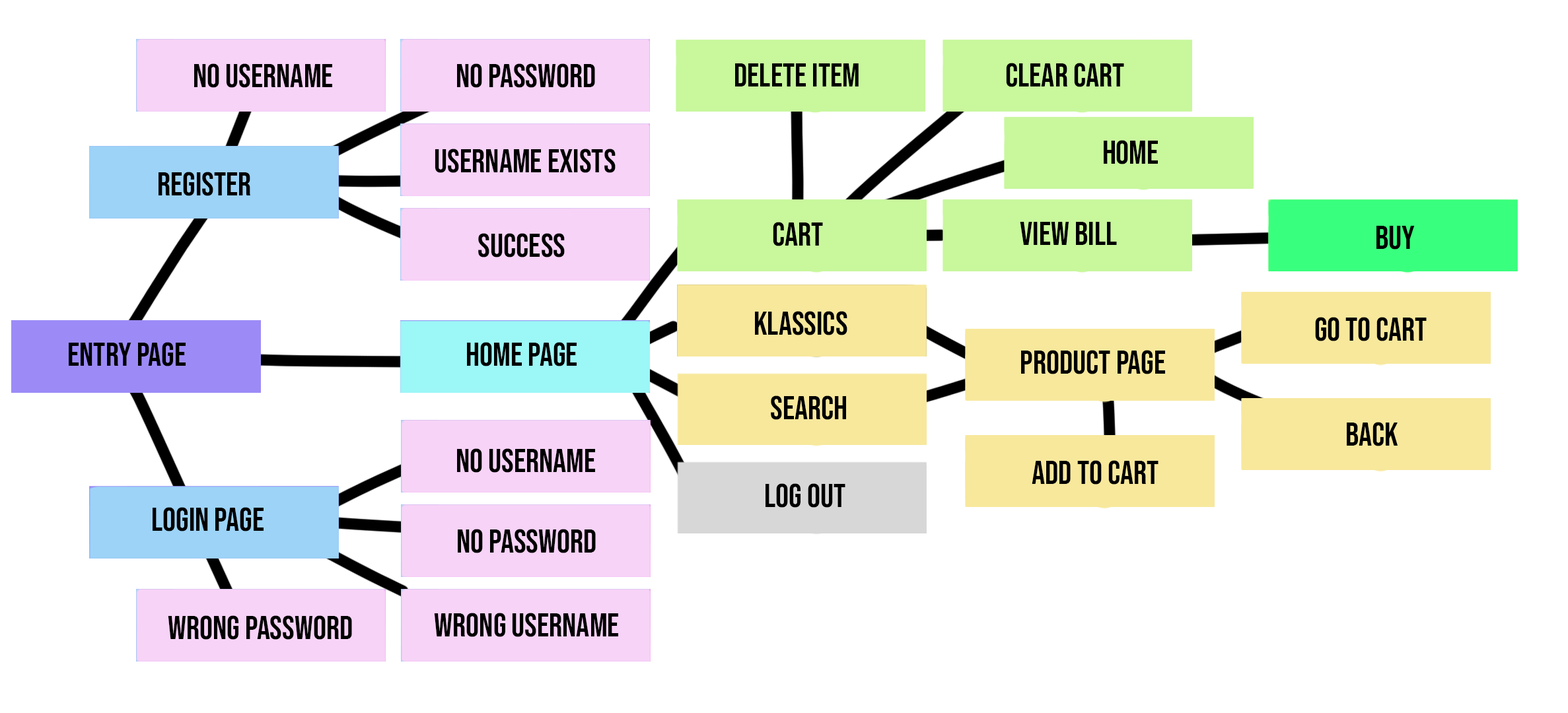
<style>
.page{position:relative;width:1568px;height:713px;background:#ffffff}
.page>*{position:absolute;margin:0}
.t1{font:33px "BebasNeue-Regular";color:#000000}
</style>
<div class="page">
<p class="t1" style="left:194px;top:63px;width:138px;height:25px">no username</p>
<p class="t1" style="left:457px;top:63px;width:138px;height:25px">No password</p>
<p class="t1" style="left:735px;top:63px;width:124px;height:24px">delete item</p>
<p class="t1" style="left:1006px;top:63px;width:118px;height:24px">clear cart</p>
<p class="t1" style="left:435px;top:149px;width:181px;height:24px">username exists</p>
<p class="t1" style="left:1104px;top:140px;width:54px;height:24px">Home</p>
<p class="t1" style="left:159px;top:172px;width:91px;height:24px">Register</p>
<p class="t1" style="left:773px;top:222px;width:50px;height:24px">Cart</p>
<p class="t1" style="left:1020px;top:222px;width:97px;height:23px">view bill</p>
<p class="t1" style="left:478px;top:233px;width:87px;height:25px">success</p>
<p class="t1" style="left:1376px;top:226px;width:39px;height:24px">buy</p>
<p class="t1" style="left:755px;top:311px;width:92px;height:25px">klassics</p>
<p class="t1" style="left:1315px;top:317px;width:112px;height:24px">go to cart</p>
<p class="t1" style="left:69px;top:342px;width:117px;height:25px">Entry page</p>
<p class="t1" style="left:467px;top:342px;width:110px;height:25px">home page</p>
<p class="t1" style="left:1021px;top:350px;width:144px;height:24px">Product page</p>
<p class="t1" style="left:771px;top:396px;width:75px;height:24px">Search</p>
<p class="t1" style="left:1347px;top:422px;width:51px;height:24px">back</p>
<p class="t1" style="left:457px;top:448px;width:138px;height:25px">no username</p>
<p class="t1" style="left:1032px;top:460px;width:126px;height:25px">add to cart</p>
<p class="t1" style="left:766px;top:483px;width:79px;height:25px">log out</p>
<p class="t1" style="left:153px;top:507px;width:111px;height:25px">login page</p>
<p class="t1" style="left:458px;top:529px;width:138px;height:24px">No password</p>
<p class="t1" style="left:168px;top:616px;width:184px;height:24px">wrong password</p>
<p class="t1" style="left:434px;top:613px;width:184px;height:24px">wrong username</p>
</div>
